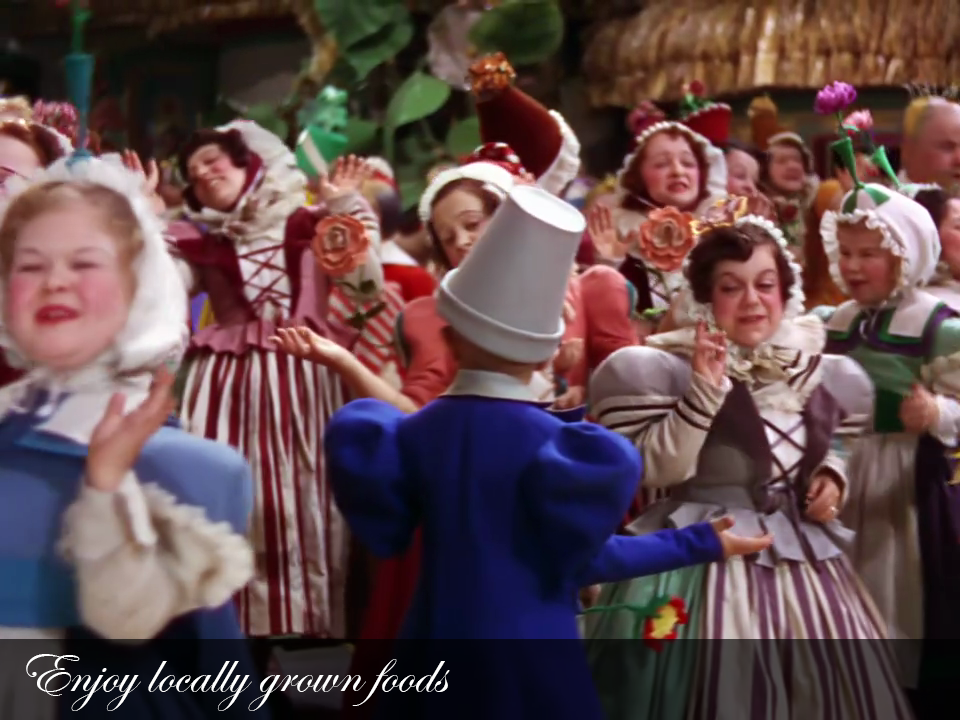
<style>
.page{position:relative;width:960px;height:720px}
.page>*{position:absolute;margin:0}
.t1{font:60px "EdwardianScriptITC";color:#ffffff}
</style>
<div class="page">
<p class="t1" style="left:26px;top:654px;width:424px;height:57px">Enjoy locally grown foods</p>
</div>
